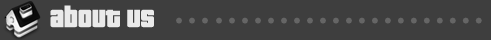
<style>
.page{position:relative;width:491px;height:40px;background:#3e3e3e}
.page>*{position:absolute;margin:0}
.t1{font:27px "PricedownBl-Regular";color:#eaeaea}
</style>
<div class="page">
<p class="t1" style="left:50px;top:5px;width:104px;height:23px">about us</p>
</div>
